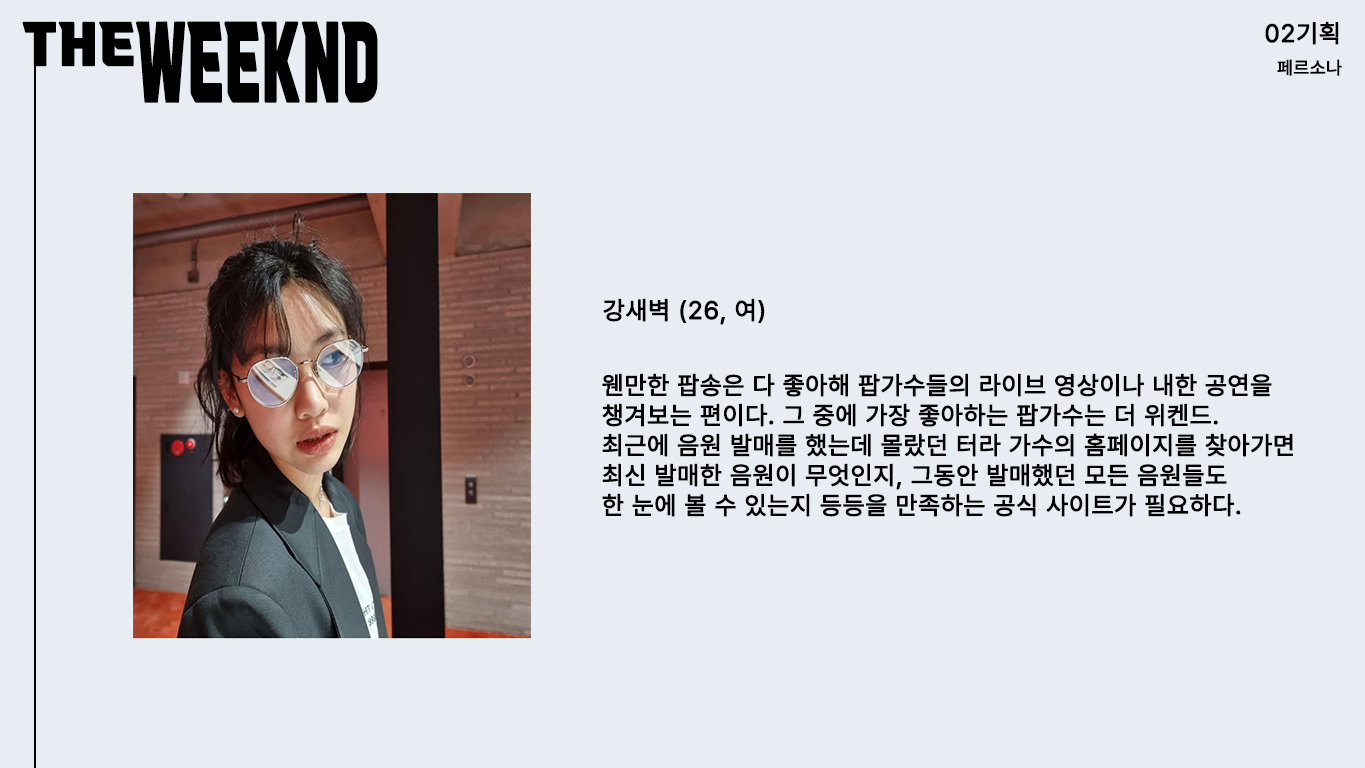
<style>
.page{position:relative;width:1365px;height:768px;background:#e8edf3}
.page>*{position:absolute;margin:0}
.t1{font:50px "VITRO-CORE-TTF";letter-spacing:0.03em;color:#000000;font-weight:bold}
.t2{font:91.5px "VITRO-CORE-TTF";letter-spacing:0.03em;color:#000000;font-weight:bold;scale:0.55 1}
.t3{font:25px "Pretendard-Regular";letter-spacing:0.03em;color:#000000;font-weight:bold}
.t4{font:18px "Pretendard-Regular";letter-spacing:0.03em;color:#000000;font-weight:bold}
.t5{font:25px/30px "Pretendard-Regular";letter-spacing:0.03em;color:#000000;font-weight:bold}
</style>
<div class="page">
<p class="t1" style="left:22px;top:21px;width:112px;height:46px">THE</p>
<p class="t2" style="left:136px;top:21px;width:242px;height:82px">WEEKND</p>
<p class="t3" style="left:1265px;top:21px;width:74px;height:24px">02기획</p>
<p class="t4" style="left:1277px;top:59px;width:65px;height:17px">페르소나</p>
<p class="t3" style="left:603px;top:298px;width:162px;height:27px">강새벽 (26, 여)</p>
<p class="t5" style="left:602px;top:373px;width:691px;height:144px">웬만한 팝송은 다 좋아해 팝가수들의 라이브 영상이나 내한 공연을 <br>챙겨보는 편이다. 그 중에 가장 좋아하는 팝가수는 더 위켄드.<br>최근에 음원 발매를 했는데 몰랐던 터라 가수의 홈페이지를 찾아가면<br>최신 발매한 음원이 무엇인지, 그동안 발매했던 모든 음원들도 <br>한 눈에 볼 수 있는지 등등을 만족하는 공식 사이트가 필요하다.</p>
</div>
